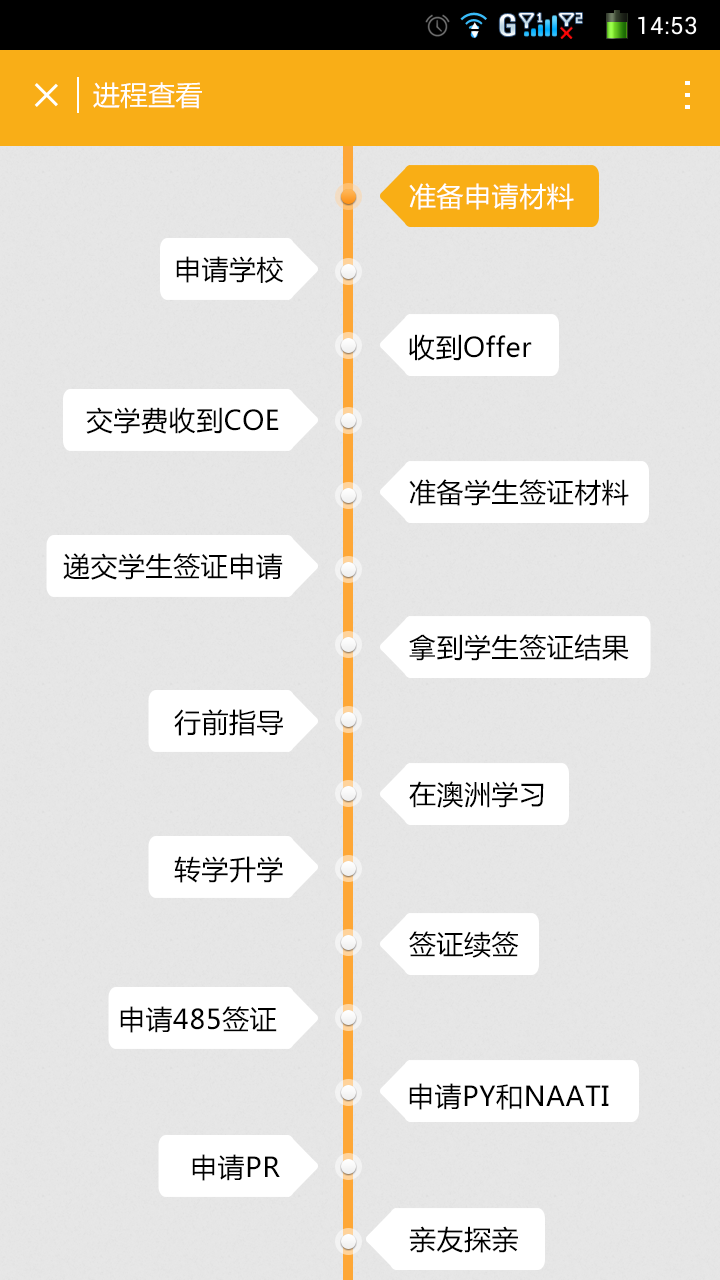
<style>
.page{position:relative;width:720px;height:1280px;background:#e6e6e6}
.page>*{position:absolute;margin:0}
.t1{font:27.3px "MicrosoftYaHei";letter-spacing:0.02em;color:#ffffff}
.t2{font:27px "MicrosoftYaHei";letter-spacing:0.02em;color:#ffffff}
.t3{font:27px "MicrosoftYaHei";letter-spacing:0.02em;color:#000000}
</style>
<div class="page">
<p class="t1" style="left:93px;top:82px;width:109px;height:27px">进程查看</p>
<p class="t2" style="left:409px;top:183px;width:165px;height:27px">准备申请材料</p>
<p class="t3" style="left:176px;top:256px;width:108px;height:27px">申请学校</p>
<p class="t3" style="left:409px;top:334px;width:123px;height:27px">收到Offer</p>
<p class="t3" style="left:86px;top:407px;width:193px;height:27px">交学费收到COE</p>
<p class="t3" style="left:409px;top:479px;width:220px;height:27px">准备学生签证材料</p>
<p class="t3" style="left:63px;top:553px;width:220px;height:27px">递交学生签证申请</p>
<p class="t3" style="left:409px;top:634px;width:220px;height:27px">拿到学生签证结果</p>
<p class="t3" style="left:174px;top:709px;width:109px;height:27px">行前指导</p>
<p class="t3" style="left:409px;top:781px;width:135px;height:27px">在澳洲学习</p>
<p class="t3" style="left:174px;top:856px;width:109px;height:27px">转学升学</p>
<p class="t3" style="left:409px;top:931px;width:110px;height:27px">签证续签</p>
<p class="t3" style="left:120px;top:1006px;width:157px;height:27px">申请485签证</p>
<p class="t3" style="left:409px;top:1083px;width:200px;height:27px">申请PY和NAATI</p>
<p class="t3" style="left:192px;top:1154px;width:88px;height:27px">申请PR</p>
<p class="t3" style="left:409px;top:1226px;width:109px;height:27px">亲友探亲</p>
</div>
